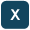
<style>
.page{position:relative;width:30px;height:30px;background:#12465e}
.page>*{position:absolute;margin:0}
.t1{font:15px "Arial-BoldMT";letter-spacing:-0.025em;color:#ffffff}
</style>
<div class="page">
<p class="t1" style="left:10px;top:9px;width:10px;height:11px">X</p>
</div>
